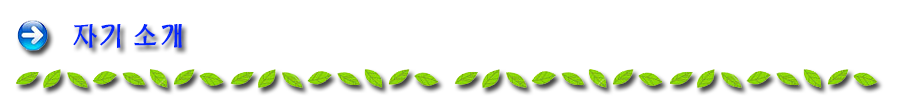
<style>
.page{position:relative;width:900px;height:100px;background:#ffffff}
.page>*{position:absolute;margin:0}
.t1{font:27px "TSTNamr";color:#0326fd}
</style>
<div class="page">
<p class="t1" style="left:73px;top:24px;width:109px;height:24px">자기 소개</p>
</div>
